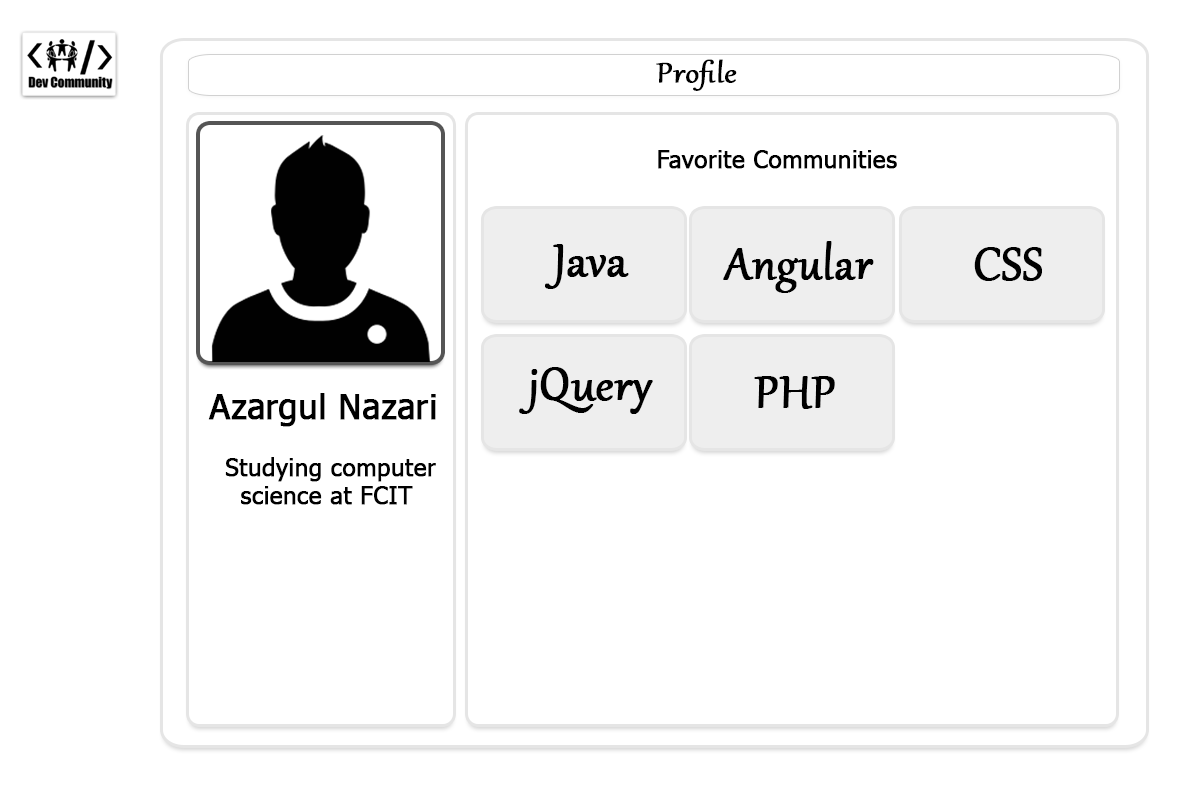
<style>
.page{position:relative;width:1200px;height:800px;background:#ffffff}
.page>*{position:absolute;margin:0}
.t1{font:34px "Gabriola";color:#000000;font-weight:bold;scale:1.12 1}
.t2{font:24px "Tahoma";color:#000000;font-weight:bold}
.t3{font:56px "Gabriola";color:#000000;font-weight:bold}
.t4{font:54px "Gabriola";color:#000000;font-weight:bold}
.t5{font:34px "Tahoma";color:#000000;font-weight:bold}
</style>
<div class="page">
<p class="t1" style="left:656px;top:59px;width:81px;height:32px">Profile</p>
<p class="t2" style="left:658px;top:150px;width:239px;height:19px">Favorite Communities</p>
<p class="t3" style="left:545px;top:244px;width:84px;height:45px">Java</p>
<p class="t4" style="left:723px;top:241px;width:151px;height:52px">Angular</p>
<p class="t3" style="left:974px;top:247px;width:68px;height:34px">CSS</p>
<p class="t3" style="left:519px;top:367px;width:134px;height:47px">jQuery</p>
<p class="t3" style="left:754px;top:376px;width:81px;height:33px">PHP</p>
<p class="t5" style="left:208px;top:393px;width:228px;height:34px">Azargul Nazari</p>
<p class="t2" style="left:225px;top:457px;width:211px;height:48px;text-align:center">Studying computer <br>science at FCIT</p>
</div>
